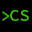
<style>
.page{position:relative;width:32px;height:32px;background:#000000}
.page>*{position:absolute;margin:0}
.t1{font:16.8px "SourceCodePro-Regular";color:#38c800}
.t2{font:16.7px "SourceCodePro-Regular";color:#38c800}
</style>
<div class="page">
<p class="t1" style="left:2px;top:11px;width:7px;height:10px">&gt;</p>
<p class="t2" style="left:10px;top:10px;width:19px;height:11px">CS</p>
</div>
